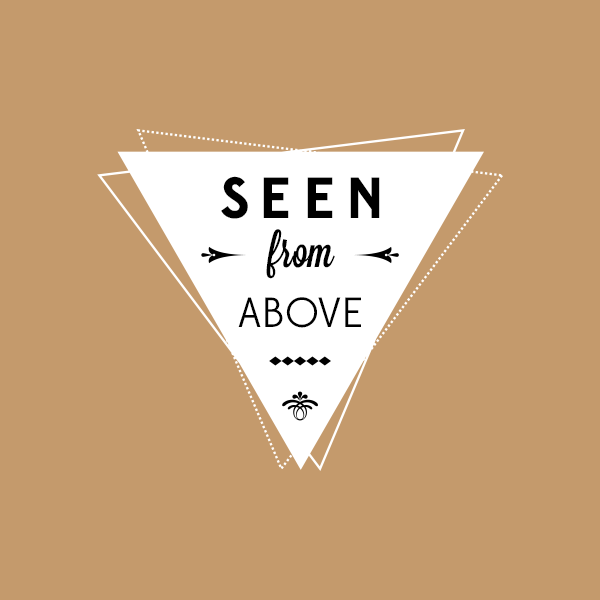
<style>
.page{position:relative;width:600px;height:600px;background:#c49a6c}
.page>*{position:absolute;margin:0}
.t1{font:58px "Edmondsans-Bold";letter-spacing:0.18em;color:#000000}
.t2{font:48px "Lavanderia-Sturdy";color:#000000}
.t3{font:42px "Edmondsans-Regular";color:#000000}
</style>
<div class="page">
<p class="t1" style="left:221px;top:176px;width:159px;height:43px">SEEN</p>
<p class="t2" style="left:266px;top:229px;width:69px;height:50px">from</p>
<p class="t3" style="left:238px;top:297px;width:123px;height:31px">ABOVE</p>
</div>
